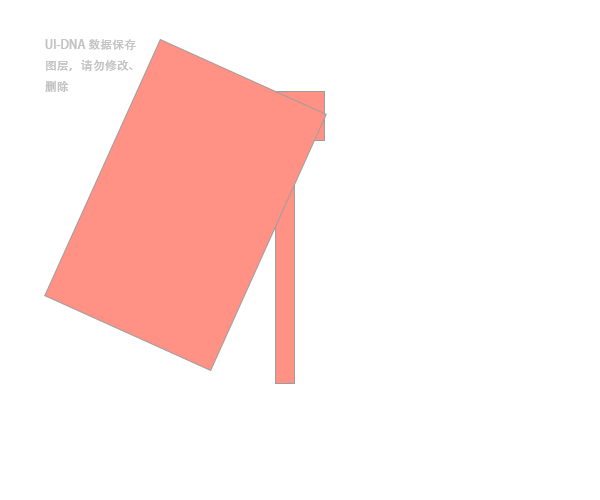
<style>
.page{position:relative;width:600px;height:500px;background:#ffffff}
.page>*{position:absolute;margin:0}
.t1{font:12px "AdobeHeitiStd-Regular";color:#c3c3c3}
</style>
<div class="page">
<p class="t1" style="left:45px;top:39px;width:91px;height:53px">UI-DNA 数据保存图层，请勿修改、删除</p>
</div>
